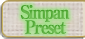
<style>
.page{position:relative;width:85px;height:39px}
.page>*{position:absolute;margin:0}
.t1{font:18px/15px "RyuminPro-ExBold";letter-spacing:-0.12em;color:#60b143;font-weight:bold;scale:0.9 1}
</style>
<div class="page">
<p class="t1" style="left:20px;top:5px;width:50px;height:29px;text-align:center">Simpan<br>Preset</p>
</div>
